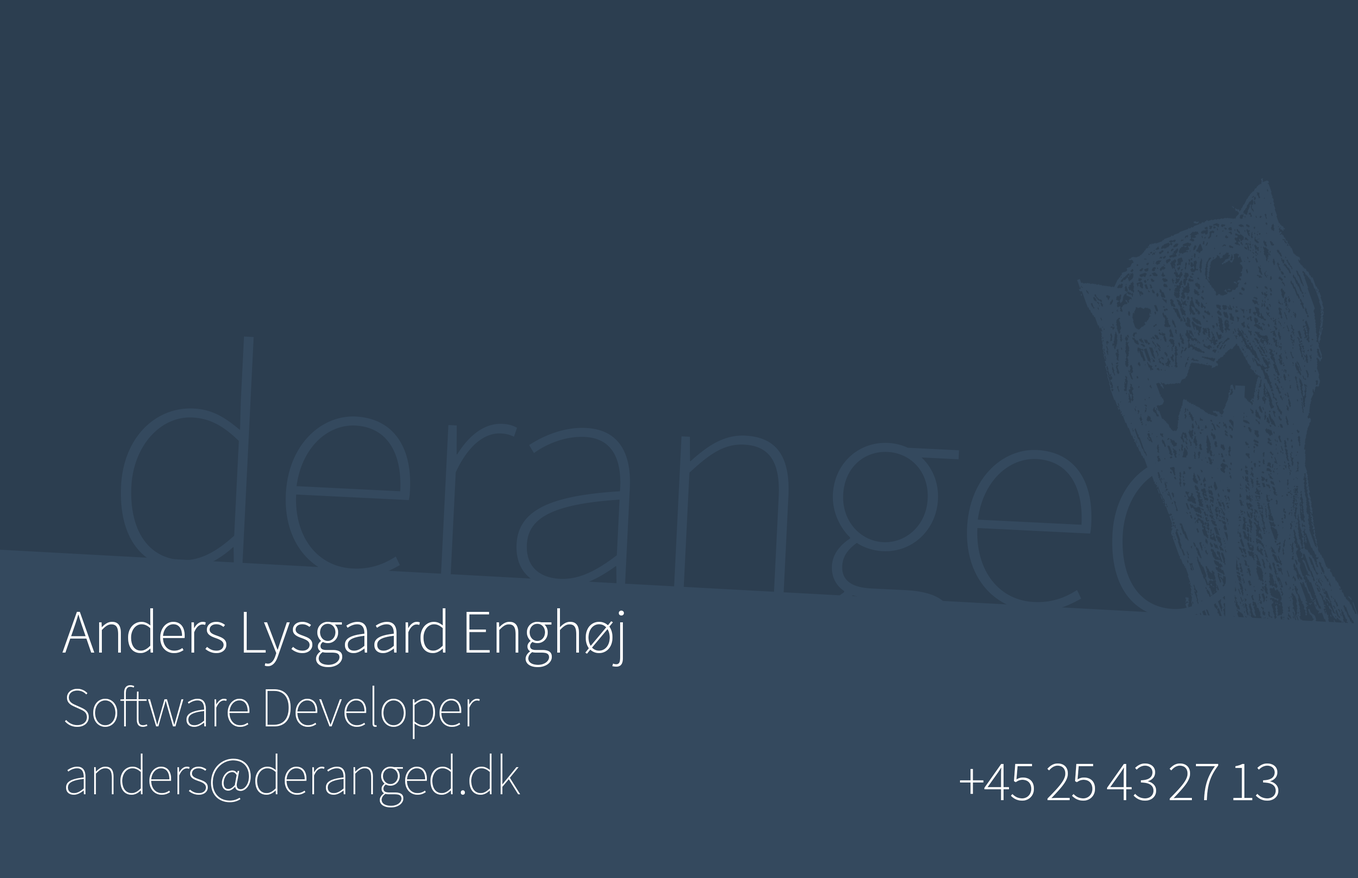
<style>
.page{position:relative;width:1358px;height:878px;background:#2c3e50}
.page>*{position:absolute;margin:0}
.t1{font:62.2px "SourceSansPro-Light";letter-spacing:-0.025em;color:#ffffff}
.t2{font:56.6px "SourceSansPro-ExtraLight";letter-spacing:-0.025em;color:#ffffff}
.t3{font:56.6px "SourceSansPro-Light";letter-spacing:-0.025em;color:#ffffff}
</style>
<div class="page">
<p class="t1" style="left:62px;top:608px;width:562px;height:59px">Anders Lysgaard Enghøj</p>
<p class="t2" style="left:65px;top:685px;width:455px;height:123px;text-align:right">Software Developer<br>anders@deranged.dk</p>
<p class="t3" style="left:960px;top:764px;width:318px;height:37px">+45 25 43 27 13</p>
</div>
